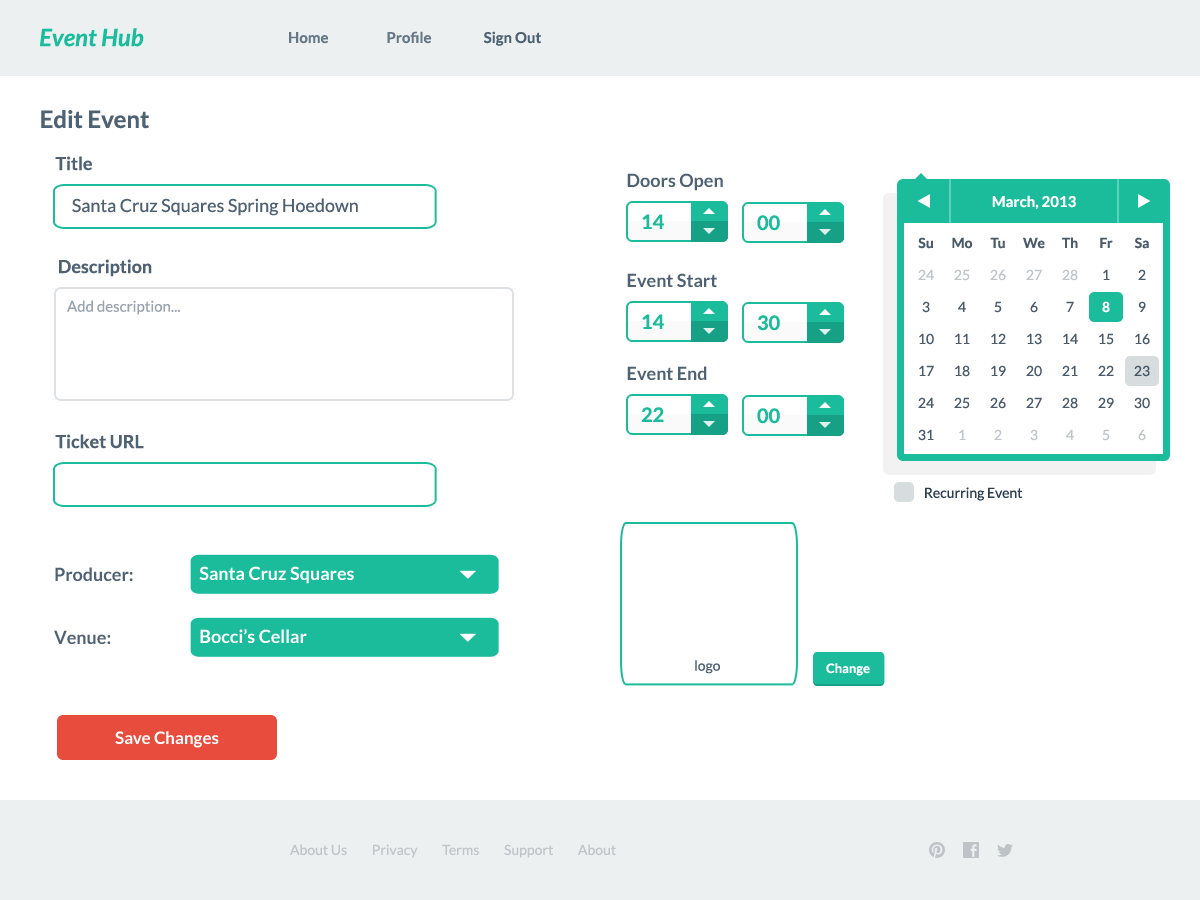
<style>
.page{position:relative;width:1200px;height:900px;background:#ffffff}
.page>*{position:absolute;margin:0}
.t1{font:24px "Lato-BoldItalic";color:#1abc9c}
.t2{font:15px "Lato-Bold";color:#4f6274}
.t3{font:15px "Lato-Bold";color:#34495e}
.t4{font:24px "Lato-Bold";color:#4f6274}
.t5{font:18px "Lato-Bold";color:#4f6274}
.t6{font:18px "Lato-Regular";color:#4f6274}
.t7{font:20px "Lato-Bold";color:#1abc9c}
.t8{font:14px "Lato-Bold";color:#4b5b6a}
.t9{font:14px "Lato-Regular";color:#bfc5ca}
.t10{font:14px "Lato-Regular";color:#4b5b6a}
.t11{font:15px "Lato-Regular";color:#99a4ae}
.t12{font:14px "Lato-Bold";color:#ffffff}
.t13{font:14px "Lato-Regular";color:#455665}
.t14{font:14.1px "Lato-Regular";color:#2c3e50}
.t15{font:18px "Lato-Bold";color:#ffffff}
.t16{font:14px "Lato-Regular";color:#4f6274}
.t17{font:13px "Lato-Bold";color:#ffffff}
.t18{font:17px "Lato-Bold";color:#ffffff}
.t19{font:14px "Lato-Regular";color:#c0c5ca}
</style>
<div class="page">
<p class="t1" style="left:40px;top:28px;width:104px;height:19px">Event Hub</p>
<p class="t2" style="left:289px;top:31px;width:252px;height:15px;opacity:0.85">Home                    Profile                  <span class="t3">Sign Out</span></p>
<p class="t4" style="left:41px;top:110px;width:108px;height:19px">Edit Event</p>
<p class="t5" style="left:55px;top:156px;width:37px;height:15px">Title</p>
<p class="t5" style="left:627px;top:173px;width:96px;height:18px">Doors Open</p>
<p class="t6" style="left:72px;top:198px;width:286px;height:18px">Santa Cruz Squares Spring Hoedown</p>
<p class="t7" style="left:642px;top:214px;width:22px;height:15px">14</p>
<p class="t7" style="left:757px;top:215px;width:23px;height:16px">00</p>
<p class="t8" style="left:918px;top:237px;width:15px;height:12px">Su</p>
<p class="t8" style="left:952px;top:237px;width:21px;height:12px">Mo</p>
<p class="t8" style="left:990px;top:237px;width:15px;height:12px">Tu</p>
<p class="t8" style="left:1023px;top:237px;width:22px;height:12px">We</p>
<p class="t8" style="left:1062px;top:237px;width:16px;height:11px">Th</p>
<p class="t8" style="left:1100px;top:237px;width:13px;height:11px">Fr</p>
<p class="t8" style="left:1134px;top:237px;width:15px;height:12px">Sa</p>
<p class="t5" style="left:59px;top:259px;width:93px;height:18px">Description</p>
<p class="t9" style="left:918px;top:269px;width:16px;height:11px">24</p>
<p class="t9" style="left:954px;top:269px;width:16px;height:12px">25</p>
<p class="t9" style="left:990px;top:269px;width:16px;height:12px">26</p>
<p class="t9" style="left:1026px;top:269px;width:16px;height:11px">27</p>
<p class="t9" style="left:1062px;top:269px;width:16px;height:12px">28</p>
<p class="t10" style="left:1103px;top:269px;width:7px;height:11px">1</p>
<p class="t10" style="left:1138px;top:269px;width:8px;height:11px">2</p>
<p class="t5" style="left:627px;top:273px;width:90px;height:14px">Event Start</p>
<p class="t11" style="left:67px;top:300px;width:113px;height:15px">Add description...</p>
<p class="t10" style="left:922px;top:301px;width:8px;height:12px">3</p>
<p class="t10" style="left:958px;top:301px;width:8px;height:11px">4</p>
<p class="t10" style="left:994px;top:301px;width:8px;height:12px">5</p>
<p class="t10" style="left:1030px;top:301px;width:8px;height:12px">6</p>
<p class="t10" style="left:1066px;top:301px;width:8px;height:11px">7</p>
<p class="t12" style="left:1102px;top:301px;width:8px;height:12px">8</p>
<p class="t10" style="left:1138px;top:301px;width:8px;height:11px">9</p>
<p class="t7" style="left:642px;top:314px;width:22px;height:15px">14</p>
<p class="t7" style="left:757px;top:315px;width:23px;height:16px">30</p>
<p class="t10" style="left:919px;top:333px;width:15px;height:12px">10</p>
<p class="t10" style="left:955px;top:333px;width:15px;height:11px">11</p>
<p class="t10" style="left:991px;top:333px;width:15px;height:11px">12</p>
<p class="t10" style="left:1027px;top:333px;width:15px;height:12px">13</p>
<p class="t10" style="left:1063px;top:333px;width:15px;height:11px">14</p>
<p class="t10" style="left:1099px;top:333px;width:15px;height:12px">15</p>
<p class="t10" style="left:1135px;top:333px;width:15px;height:12px">16</p>
<p class="t5" style="left:627px;top:366px;width:80px;height:14px">Event End</p>
<p class="t10" style="left:919px;top:365px;width:15px;height:11px">17</p>
<p class="t10" style="left:955px;top:365px;width:15px;height:12px">18</p>
<p class="t10" style="left:991px;top:365px;width:15px;height:11px">19</p>
<p class="t10" style="left:1026px;top:365px;width:16px;height:12px">20</p>
<p class="t10" style="left:1062px;top:365px;width:16px;height:11px">21</p>
<p class="t10" style="left:1098px;top:365px;width:16px;height:11px">22</p>
<p class="t13" style="left:1134px;top:365px;width:16px;height:12px">23</p>
<p class="t10" style="left:918px;top:397px;width:16px;height:11px">24</p>
<p class="t10" style="left:954px;top:397px;width:16px;height:12px">25</p>
<p class="t10" style="left:990px;top:397px;width:16px;height:12px">26</p>
<p class="t10" style="left:1026px;top:397px;width:16px;height:11px">27</p>
<p class="t10" style="left:1062px;top:397px;width:16px;height:12px">28</p>
<p class="t10" style="left:1098px;top:397px;width:16px;height:11px">29</p>
<p class="t10" style="left:1134px;top:397px;width:16px;height:12px">30</p>
<p class="t7" style="left:641px;top:407px;width:23px;height:15px">22</p>
<p class="t7" style="left:757px;top:408px;width:23px;height:16px">00</p>
<p class="t5" style="left:55px;top:434px;width:89px;height:15px">Ticket URL</p>
<p class="t10" style="left:918px;top:429px;width:16px;height:12px">31</p>
<p class="t9" style="left:959px;top:429px;width:7px;height:11px">1</p>
<p class="t9" style="left:994px;top:429px;width:8px;height:11px">2</p>
<p class="t9" style="left:1030px;top:429px;width:8px;height:12px">3</p>
<p class="t9" style="left:1066px;top:429px;width:8px;height:11px">4</p>
<p class="t9" style="left:1102px;top:429px;width:8px;height:12px">5</p>
<p class="t9" style="left:1138px;top:429px;width:8px;height:12px">6</p>
<p class="t14" style="left:925px;top:487px;width:98px;height:14px">Recurring Event</p>
<p class="t5" style="left:55px;top:567px;width:78px;height:14px">Producer:</p>
<p class="t15" style="left:199px;top:566px;width:155px;height:18px">Santa Cruz Squares</p>
<p class="t5" style="left:54px;top:630px;width:57px;height:14px">Venue:</p>
<p class="t15" style="left:200px;top:629px;width:107px;height:14px">Bocci’s Cellar</p>
<p class="t16" style="left:695px;top:660px;width:25px;height:14px">logo</p>
<p class="t17" style="left:826px;top:663px;width:44px;height:13px">Change</p>
<p class="t18" style="left:115px;top:731px;width:104px;height:17px">Save Changes</p>
<p class="t19" style="left:290px;top:844px;width:326px;height:14px">About Us         Privacy         Terms         Support         About</p>
</div>
